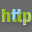
<style>
.page{position:relative;width:32px;height:32px;background:#6b6b6b}
.page>*{position:absolute;margin:0}
.t1{font:18px "HelveticaNeue-CondensedBlack"}
</style>
<div class="page">
<p class="t1" style="left:2px;top:9px;width:30px;height:16px">http</p>
</div>
